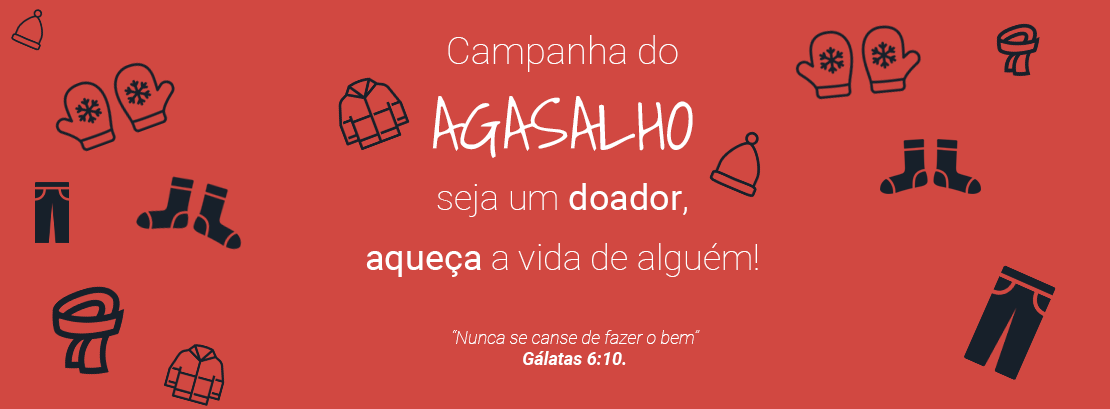
<style>
.page{position:relative;width:1110px;height:409px;background:#d14841}
.page>*{position:absolute;margin:0}
.t1{font:36px/60px "Roboto-Thin";color:#ffffff}
.t2{font:38px "Roboto-Thin";color:#ffffff}
.t3{font:72px "ShadowsIntoLight";color:#ffffff}
.t4{font:36px/60px "Roboto-Regular";color:#ffffff}
.t5{font:36px/60px "Roboto-Light";color:#ffffff}
.t6{font:18px "Roboto-ThinItalic";color:#ffffff}
.t7{font:18px "Roboto-BoldItalic";color:#ffffff}
</style>
<div class="page">
<p class="t1" style="left:366px;top:35px;width:392px;height:242px;text-align:center"><span class="t2">Campanha do <br></span><span class="t3">AGASALHO<br></span>seja um <span class="t4">doador</span><span class="t5">,<br></span><span class="t4">aqueça</span> a vida de alguém!</p>
<p class="t6" style="left:452px;top:330px;width:248px;height:35px;text-align:center">“Nunca se canse de fazer o bem” <br><span class="t7">Gálatas 6:10.</span></p>
</div>
